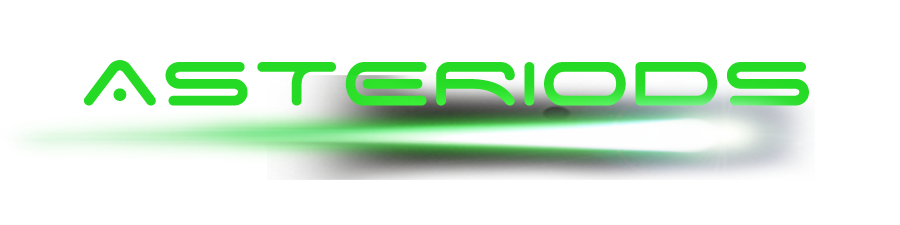
<style>
.page{position:relative;width:900px;height:225px;background:#ffffff}
.page>*{position:absolute;margin:0}
.t1{font:99px "SpaceAge";color:#25da25}
</style>
<div class="page">
<p class="t1" style="left:84px;top:60px;width:725px;height:46px">ASTERIODS</p>
</div>
